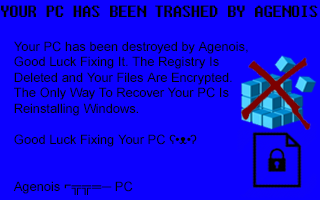
<style>
.page{position:relative;width:320px;height:200px;background:#0c00ff}
.page>*{position:absolute;margin:0}
.t1{font:16.5px "Fixedsys";letter-spacing:-0.075em;color:#000000}
.t2{font:13px "ArialMT";color:#000000}
</style>
<div class="page">
<p class="t1" style="left:1px;top:5px;width:317px;height:12px">YOUR PC HAS BEEN TRASHED BY AGENOIS</p>
<p class="t2" style="left:13px;top:41px;width:235px;height:154px">Your PC has been destroyed by Agenois,<br>Good Luck Fixing It. The Registry Is<br>Deleted and Your Files Are Encrypted.<br>The Only Way To Recover Your PC Is<br>Reinstalling Windows.<br><br>Good Luck Fixing Your PC ʕ•ᴥ•ʔ<br><br><br>Agenois ⌐╦╦═─ PC</p>
</div>
